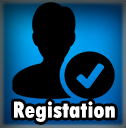
<style>
.page{position:relative;width:126px;height:128px;background:#000000}
.page>*{position:absolute;margin:0}
.t1{font:24px "TwCenMT-CondensedExtraBold";color:#ffffff}
</style>
<div class="page">
<p class="t1" style="left:14px;top:101px;width:101px;height:21px">Registation</p>
</div>
